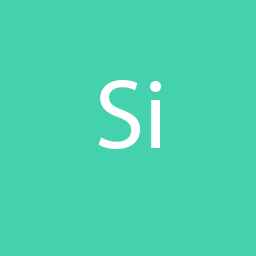
<style>
.page{position:relative;width:256px;height:256px;background:#44d1ae}
.page>*{position:absolute;margin:0}
.t1{font:100px "MyriadPro-Regular";color:#ffffff}
</style>
<div class="page">
<p class="t1" style="left:98px;top:80px;width:63px;height:69px">Si</p>
</div>
